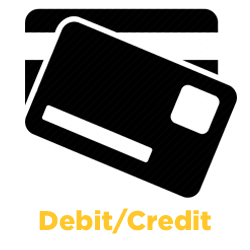
<style>
.page{position:relative;width:250px;height:250px;background:#ffffff}
.page>*{position:absolute;margin:0}
.t1{font:27px "Gotham-Black";color:#ffc729}
</style>
<div class="page">
<p class="t1" style="left:39px;top:208px;width:172px;height:26px">Debit/Credit</p>
</div>
